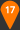
<style>
.page{position:relative;width:20px;height:30px;background:#ff7800}
.page>*{position:absolute;margin:0}
.t1{font:9px "OpenSans";color:#ffffff;font-weight:bold}
</style>
<div class="page">
<p class="t1" style="left:5px;top:6px;width:10px;height:8px">17</p>
</div>
